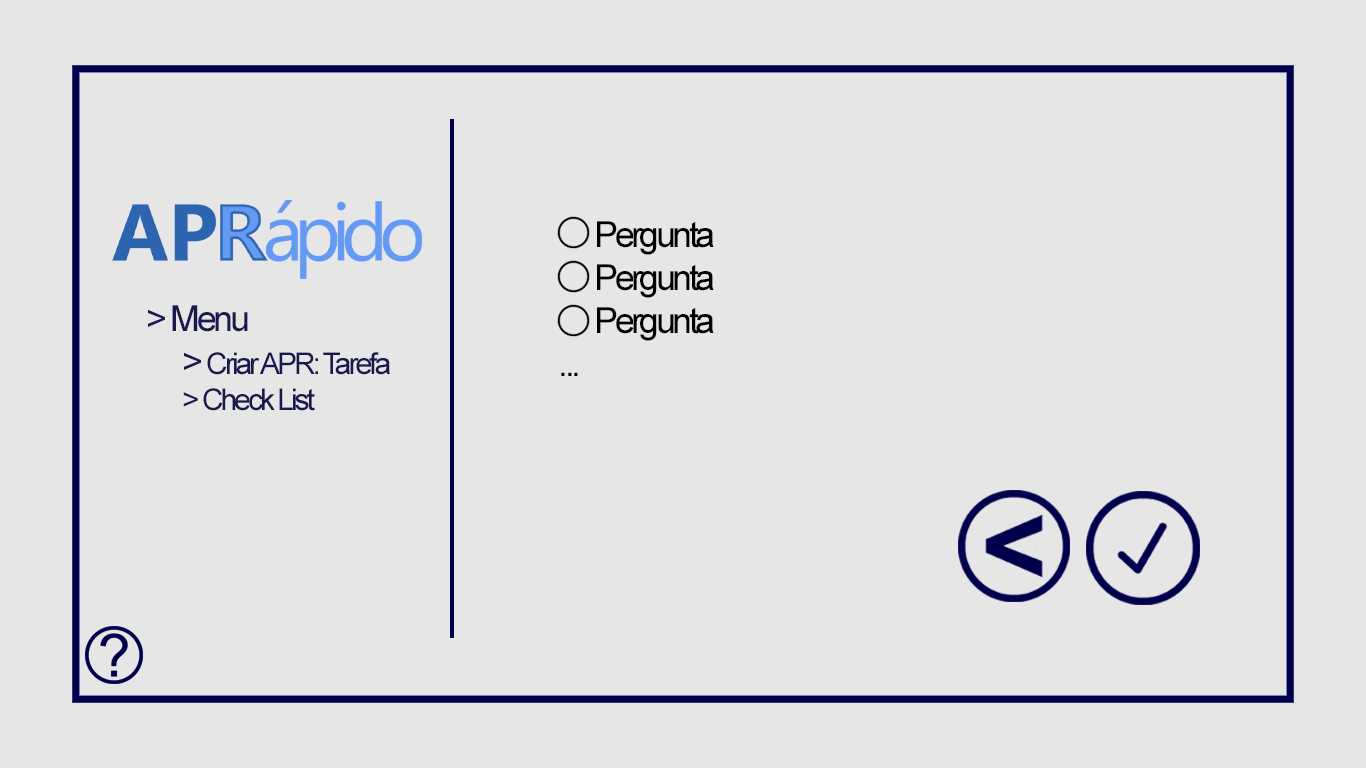
<style>
.page{position:relative;width:1366px;height:768px;background:#e6e6e6}
.page>*{position:absolute;margin:0}
.t1{font:36px "ArialMT";letter-spacing:-0.1em;color:#000000}
.t2{font:30px "ArialMT";letter-spacing:-0.1em;color:#19194f}
.t3{font:36px "ArialMT";letter-spacing:-0.095em;color:#19194f}
</style>
<div class="page">
<p class="t1" style="left:561px;top:221px;width:153px;height:155px">Pergunta<br> Pergunta<br> Pergunta<br>...</p>
<p class="t2" style="left:148px;top:305px;width:242px;height:106px"><span class="t3">&gt; Menu<br> &gt; </span>Criar APR: Tarefa<br> &gt; Check List</p>
</div>
